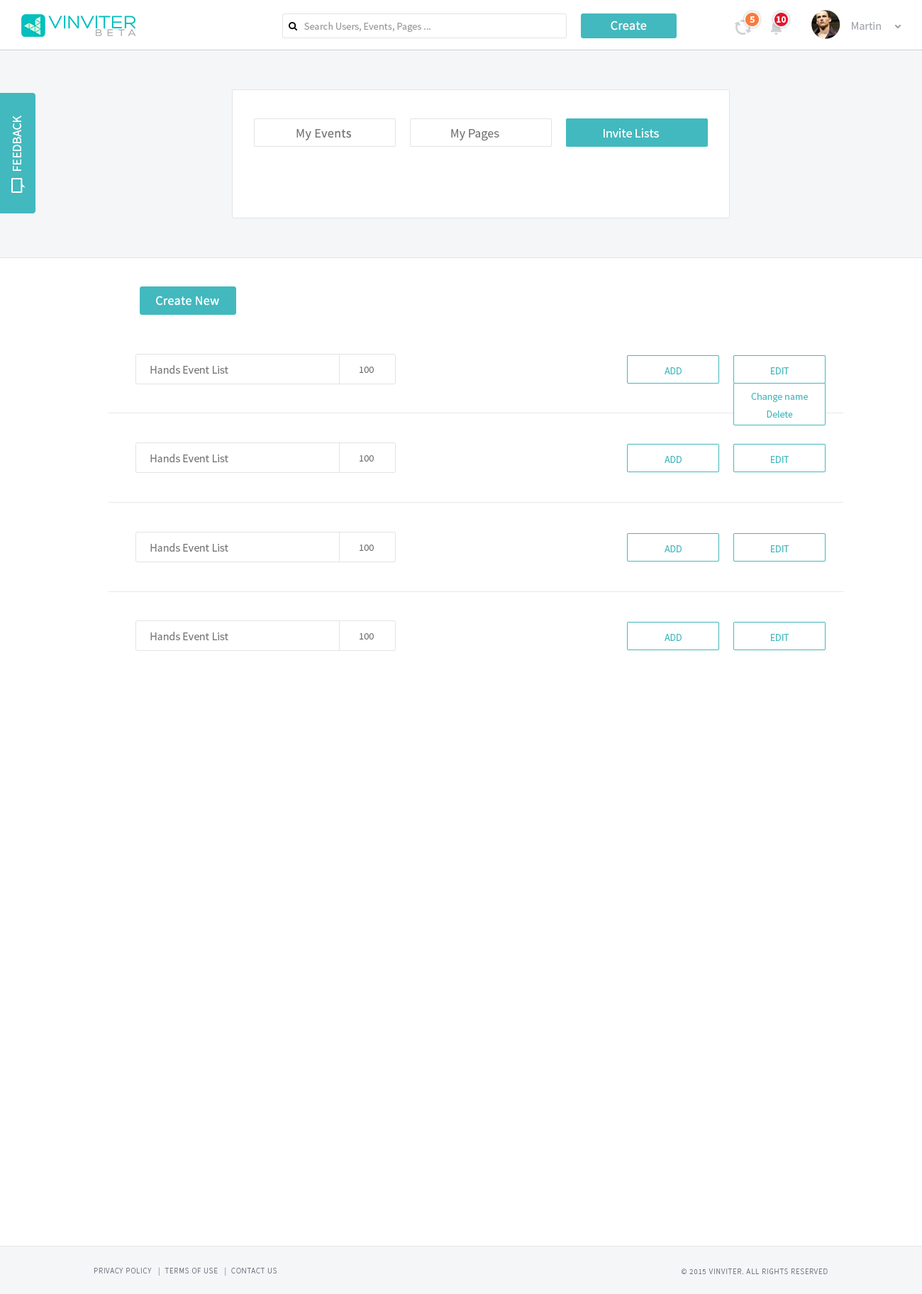
<style>
.page{position:relative;width:922px;height:1294px;background:#ffffff}
.page>*{position:absolute;margin:0}
.t1{font:9.2px "SourceSansPro-Bold";color:#ffffff}
.t2{font:10.2px "SourceSansPro-Regular";color:#999999}
.t3{font:12.8px "SourceSansPro-Regular";letter-spacing:0.02em;color:#ffffff}
.t4{font:11.3px "SourceSansPro-Regular";color:#a3a6ae}
.t5{font:12.8px "SourceSansPro-Regular";color:#ffffff}
.t6{font:12.8px "SourceSansPro-Regular";letter-spacing:0.02em;color:#767676}
.t7{font:12.8px "SourceSansPro-Regular";color:#767676}
.t8{font:11.3px "SourceSansPro-Regular";color:#767676}
.t9{font:9.9px "SourceSansPro-Regular";color:#767676}
.t10{font:9.9px "SourceSansPro-Regular";color:#42b9be}
.t11{font:7.8px "SourceSansPro-Light";letter-spacing:0.075em;color:#747a85;text-transform:uppercase}
</style>
<div class="page">
<p class="t1" style="left:749px;top:16px;width:5px;height:7px">5</p>
<p class="t1" style="left:776px;top:16px;width:10px;height:7px">10</p>
<p class="t2" style="left:304px;top:22px;width:126px;height:11px">Search Users, Events, Pages ...</p>
<p class="t3" style="left:610px;top:21px;width:37px;height:9px">Create</p>
<p class="t4" style="left:851px;top:22px;width:30px;height:8px">Martin</p>
<p class="t5" style="left:13px;top:116px;width:8px;height:55px;rotate:-90deg">FEEDBACK</p>
<p class="t6" style="left:296px;top:129px;width:55px;height:11px">My Events</p>
<p class="t7" style="left:451px;top:129px;width:48px;height:12px">My Pages</p>
<p class="t5" style="left:603px;top:128px;width:56px;height:10px">Invite Lists</p>
<p class="t3" style="left:156px;top:296px;width:63px;height:10px">Create New</p>
<p class="t8" style="left:150px;top:365px;width:78px;height:9px">Hands Event List</p>
<p class="t9" style="left:359px;top:367px;width:15px;height:6px">100</p>
<p class="t10" style="left:664px;top:367px;width:17px;height:7px">ADD</p>
<p class="t10" style="left:771px;top:367px;width:18px;height:7px">EDIT</p>
<p class="t10" style="left:751px;top:393px;width:56px;height:9px">Change name</p>
<p class="t10" style="left:766px;top:410px;width:27px;height:8px">Delete</p>
<p class="t8" style="left:150px;top:454px;width:78px;height:8px">Hands Event List</p>
<p class="t9" style="left:359px;top:455px;width:15px;height:7px">100</p>
<p class="t10" style="left:664px;top:456px;width:17px;height:7px">ADD</p>
<p class="t10" style="left:771px;top:456px;width:18px;height:7px">EDIT</p>
<p class="t8" style="left:150px;top:543px;width:78px;height:9px">Hands Event List</p>
<p class="t9" style="left:359px;top:544px;width:15px;height:7px">100</p>
<p class="t10" style="left:664px;top:545px;width:17px;height:7px">ADD</p>
<p class="t10" style="left:771px;top:545px;width:18px;height:7px">EDIT</p>
<p class="t8" style="left:150px;top:632px;width:78px;height:8px">Hands Event List</p>
<p class="t9" style="left:359px;top:633px;width:15px;height:6px">100</p>
<p class="t10" style="left:664px;top:634px;width:17px;height:7px">ADD</p>
<p class="t10" style="left:771px;top:634px;width:18px;height:7px">EDIT</p>
<p class="t11" style="left:94px;top:1267px;width:183px;height:8px">Privacy Policy   |  Terms of Use   |  Contact us</p>
<p class="t11" style="left:681px;top:1268px;width:146px;height:6px">© 2015 VINVITER. All rights reserved</p>
</div>
